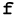
<style>
.page{position:relative;width:16px;height:16px;background:#ffffff}
.page>*{position:absolute;margin:0}
.t1{font:20px "CourierNewPS-BoldMT";color:#000000}
</style>
<div class="page">
<p class="t1" style="left:3px;top:2px;width:11px;height:13px">f</p>
</div>
